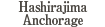
<style>
.page{position:relative;width:105px;height:27px;background:#ffffff}
.page>*{position:absolute;margin:0}
.t1{font:14px/13px "RyuminPro-ExBold";letter-spacing:-0.04em;color:#4c4843;scale:0.9 1}
</style>
<div class="page">
<p class="t1" style="left:18px;top:1px;width:70px;height:26px;text-align:center">Hashirajima<br>Anchorage</p>
</div>
